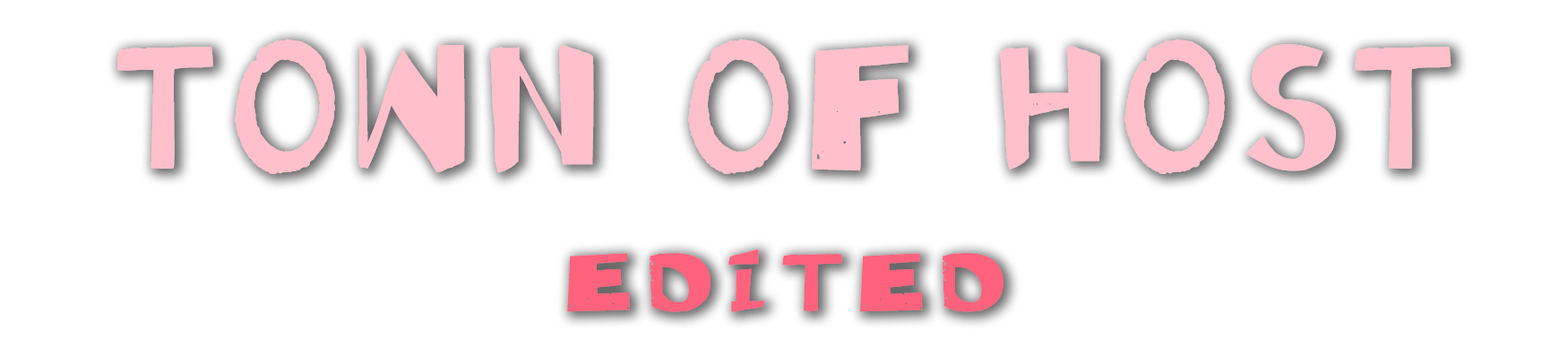
<style>
.page{position:relative;width:1568px;height:340px;background:#ffffff}
.page>*{position:absolute;margin:0}
.t1{font:176.4px "ShanghaiFace-Zen-BoldGB2.0";letter-spacing:0.05em;color:#ffc0cb;scale:0.73 1}
.t2{font:82.4px "ShanghaiFace-Zen-BoldGB2.0";letter-spacing:0.1em;color:#ff627d;scale:0.97 1}
</style>
<div class="page">
<p class="t1" style="left:117px;top:39px;width:1335px;height:135px">TOWN OF HOST</p>
<p class="t2" style="left:567px;top:249px;width:437px;height:63px">EDITED</p>
</div>
